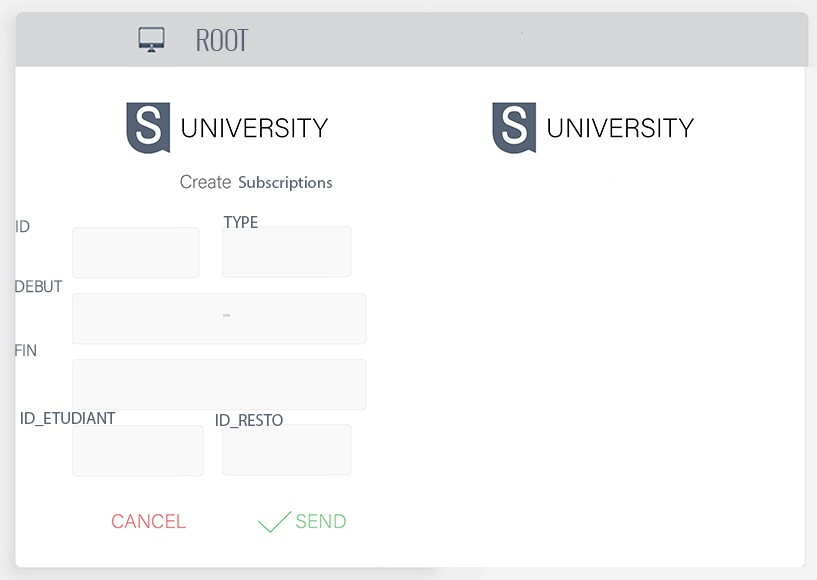
<style>
.page{position:relative;width:817px;height:580px;background:#ffffff}
.page>*{position:absolute;margin:0}
.t1{font:26.8px "Oswald-Light";color:#566374;text-transform:uppercase}
.t2{font:16.7px "MyriadPro-Regular";color:#566374}
.t3{font:16.7px "AcuminConcept-SemiCondensedLight";color:#566374}
</style>
<div class="page">
<p class="t1" style="left:197px;top:29px;width:52px;height:22px">root</p>
<p class="t2" style="left:238px;top:176px;width:94px;height:15px">Subscriptions</p>
<p class="t3" style="left:16px;top:220px;width:14px;height:13px">ID</p>
<p class="t2" style="left:223px;top:216px;width:35px;height:12px">TYPE</p>
<p class="t3" style="left:15px;top:280px;width:48px;height:13px">DEBUT</p>
<p class="t3" style="left:15px;top:344px;width:21px;height:13px">FIN</p>
<p class="t2" style="left:21px;top:412px;width:95px;height:15px">ID_ETUDIANT</p>
<p class="t2" style="left:216px;top:414px;width:67px;height:15px">ID_RESTO</p>
</div>
